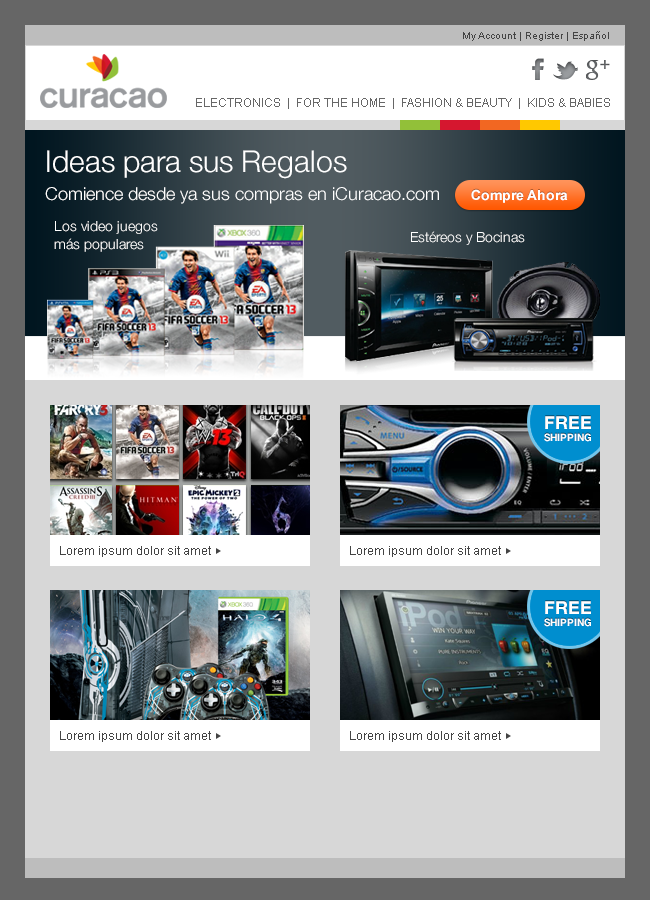
<style>
.page{position:relative;width:650px;height:900px;background:#d7d7d7}
.page>*{position:absolute;margin:0}
.t1{font:10px "ArialMT";color:#444444}
.t2{font:12px "ArialMT";color:#666666}
.t3{font:18px/28px "HelveticaNeue-Light";color:#ffffff}
.t4{font:30px/16px "HelveticaNeue-Light";color:#ffffff}
.t5{font:14px/18px "HelveticaNeue-Light";color:#ffffff}
.t6{font:14px "HelveticaNeue-Light";color:#ffffff}
.t7{font:10px/12px "HelveticaNeue-Bold";color:#ffffff}
.t8{font:18px/14px "HelveticaNeue-Bold";color:#ffffff}
.t9{font:12px "ArialMT";color:#444444}
</style>
<div class="page">
<p class="t1" style="left:463px;top:31px;width:146px;height:10px">My Account | Register | Español</p>
<p class="t2" style="left:196px;top:98px;width:414px;height:11px">ELECTRONICS  |  FOR THE HOME  |  FASHION &amp; BEAUTY  |  KIDS &amp; BABIES</p>
<p class="t3" style="left:45px;top:150px;width:394px;height:54px"><span class="t4">Ideas para sus Regalos<br></span>Comience desde ya sus compras en iCuracao.com</p>
<p class="t5" style="left:54px;top:221px;width:104px;height:31px">Los video juegos más populares</p>
<p class="t6" style="left:411px;top:231px;width:114px;height:14px">Estéreos y Bocinas</p>
<p class="t7" style="left:544px;top:416px;width:47px;height:26px;text-align:center"><span class="t8">FREE<br></span>SHIPPING</p>
<p class="t9" style="left:60px;top:546px;width:151px;height:11px">Lorem ipsum dolor sit amet</p>
<p class="t9" style="left:350px;top:546px;width:151px;height:11px">Lorem ipsum dolor sit amet</p>
<p class="t7" style="left:544px;top:601px;width:47px;height:26px;text-align:center"><span class="t8">FREE<br></span>SHIPPING</p>
<p class="t9" style="left:60px;top:731px;width:151px;height:11px">Lorem ipsum dolor sit amet</p>
<p class="t9" style="left:350px;top:731px;width:151px;height:11px">Lorem ipsum dolor sit amet</p>
</div>
